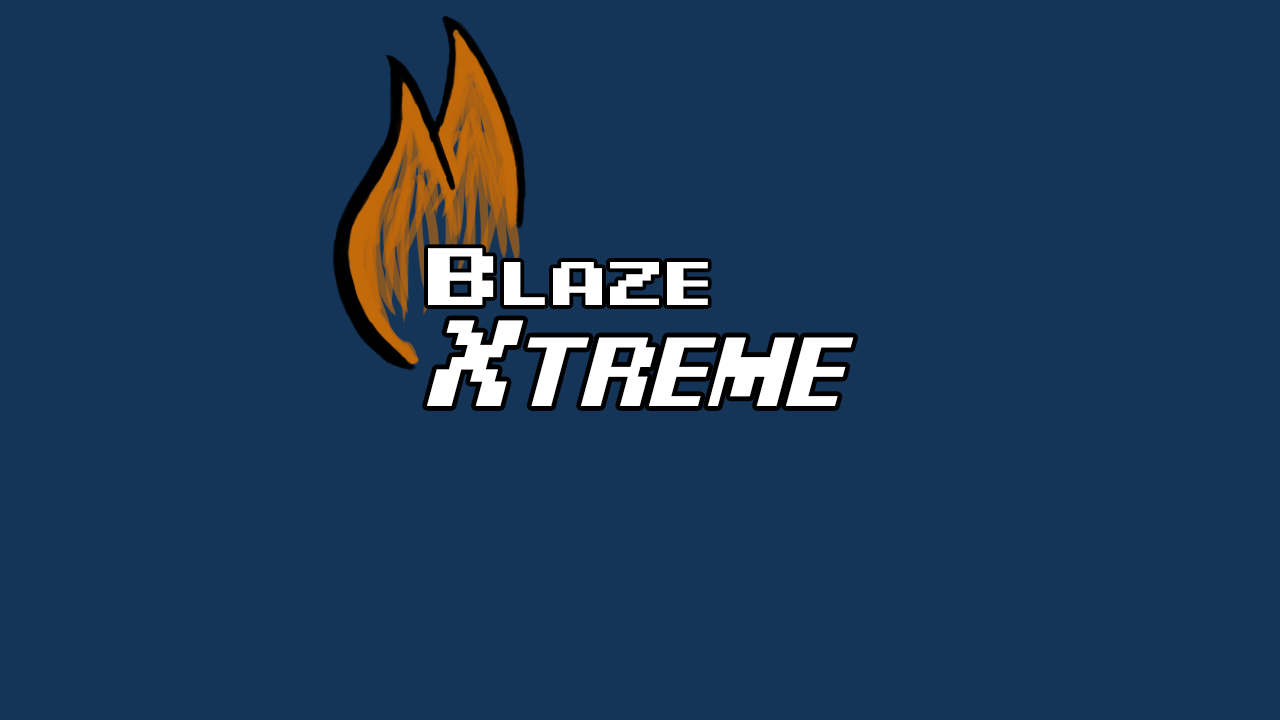
<style>
.page{position:relative;width:1280px;height:720px;background:#143458}
.page>*{position:absolute;margin:0}
.t1{font:62.9px "PixelDigivolve";color:#ffffff;scale:1.33 1}
.t2{font:83.3px "PixelDigivolve";color:#ffffff;scale:1.33 1}
.t3{font:100.3px "PixelDigivolve-Italic";color:#ffffff}
.t4{font:125px "PixelDigivolve-Italic";color:#ffffff}
</style>
<div class="page">
<p class="t1" style="left:428px;top:248px;width:280px;height:57px"><span class="t2">B</span>laze</p>
<p class="t3" style="left:427px;top:320px;width:427px;height:86px"><span class="t4">X</span>treme</p>
</div>
